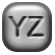
<style>
.page{position:relative;width:55px;height:55px;background:#ffffff}
.page>*{position:absolute;margin:0}
.t1{font:28px "ArialMT"}
</style>
<div class="page">
<p class="t1" style="left:9px;top:17px;width:35px;height:20px">YZ</p>
</div>
